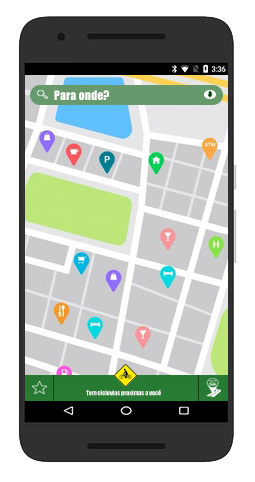
<style>
.page{position:relative;width:255px;height:482px;background:#ffffff}
.page>*{position:absolute;margin:0}
.t1{font:12px "Impact";color:#ffffff}
.t2{font:6px "Impact";color:#ffffff}
</style>
<div class="page">
<p class="t1" style="left:54px;top:90px;width:55px;height:10px">Para onde?</p>
<p class="t2" style="left:86px;top:390px;width:75px;height:6px">Tem ciclovias proximas a você</p>
</div>
